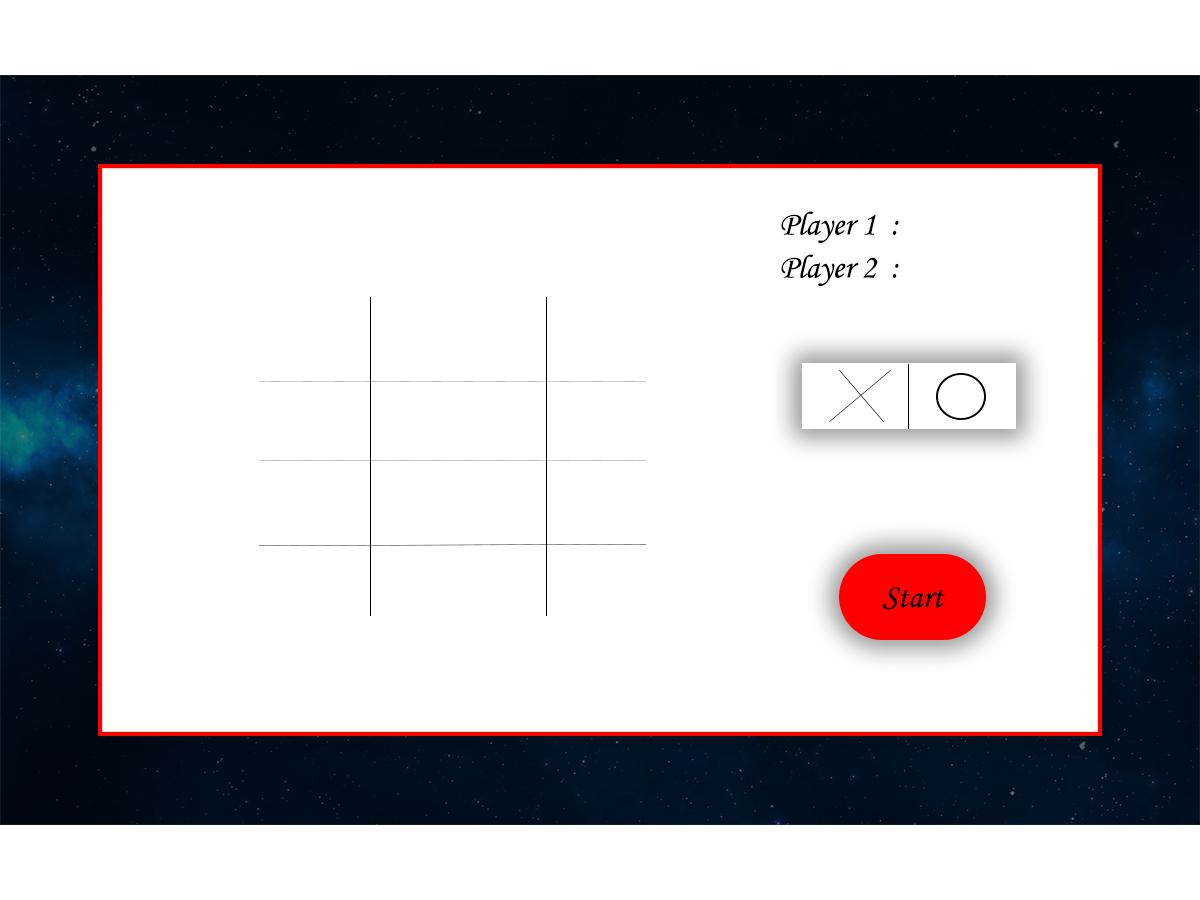
<style>
.page{position:relative;width:1200px;height:900px;background:#ffffff}
.page>*{position:absolute;margin:0}
.t1{font:33.3px "MonotypeCorsiva";color:#000000}
</style>
<div class="page">
<p class="t1" style="left:781px;top:211px;width:118px;height:32px">Player 1  :</p>
<p class="t1" style="left:781px;top:254px;width:118px;height:32px">Player 2  :</p>
<p class="t1" style="left:882px;top:587px;width:63px;height:23px">Start</p>
</div>
